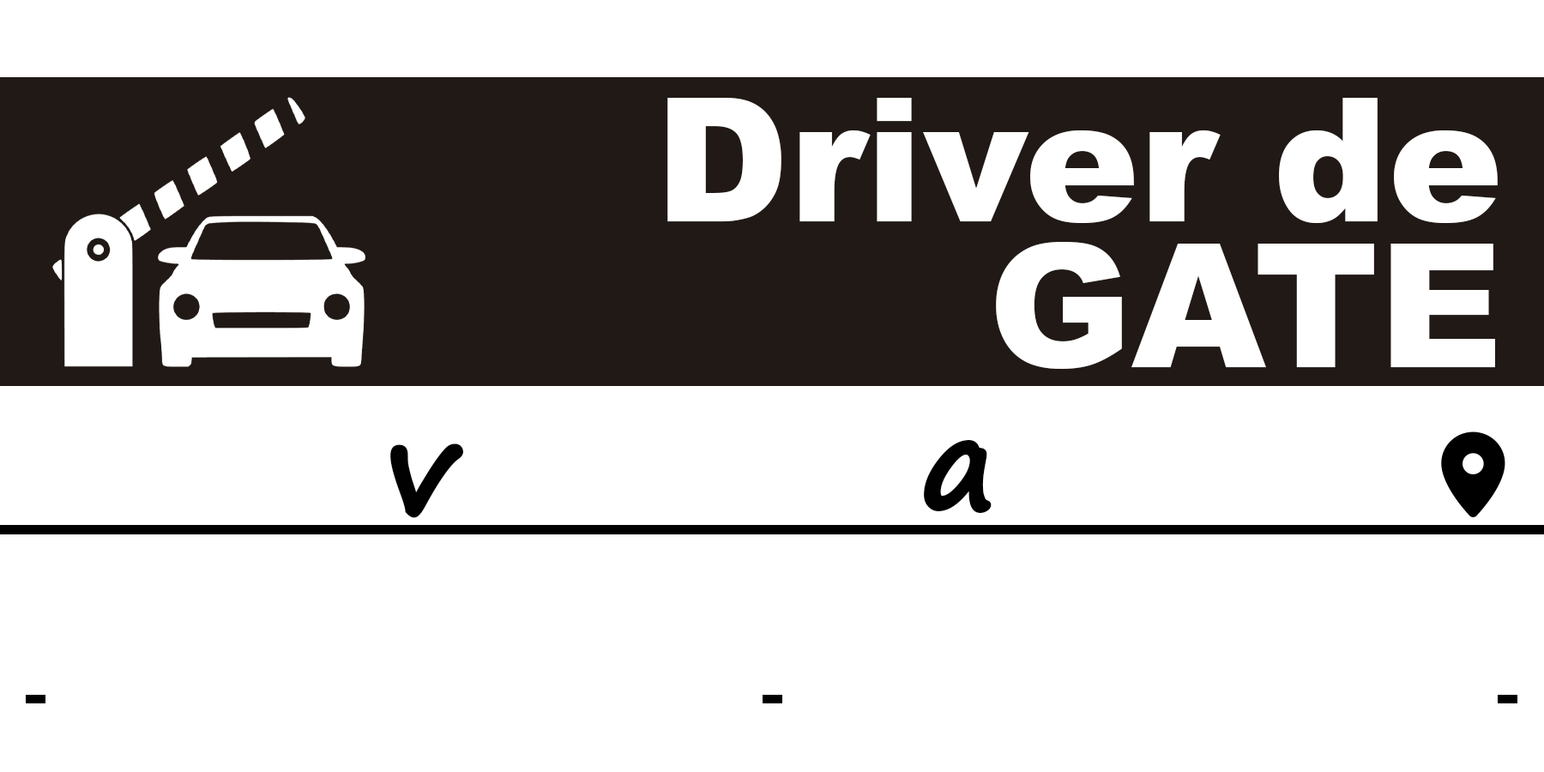
<style>
.page{position:relative;width:1544px;height:772px;background:#ffffff}
.page>*{position:absolute;margin:0}
.t1{font:172.5px/145.3px "Arial-Black";color:#ffffff}
.t2{font:127.1px "SegoePrint-Bold";letter-spacing:-0.01em;color:#010101;font-weight:bold}
.t3{font:127.1px "Arial-BoldMT";letter-spacing:-0.01em;color:#010101}
</style>
<div class="page">
<p class="t1" style="left:667px;top:98px;width:831px;height:271px;text-align:right">Driver de<br>GATE</p>
<p class="t2" style="left:390px;top:444px;width:74px;height:74px">v</p>
<p class="t2" style="left:924px;top:439px;width:68px;height:75px"><span class="t3">   </span>a</p>
</div>
